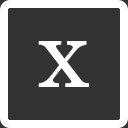
<style>
.page{position:relative;width:128px;height:128px;background:#333333}
.page>*{position:absolute;margin:0}
.t1{font:100.3px "Century";letter-spacing:0.05em;color:#ffffff}
</style>
<div class="page">
<p class="t1" style="left:38px;top:41px;width:51px;height:46px">x</p>
</div>
